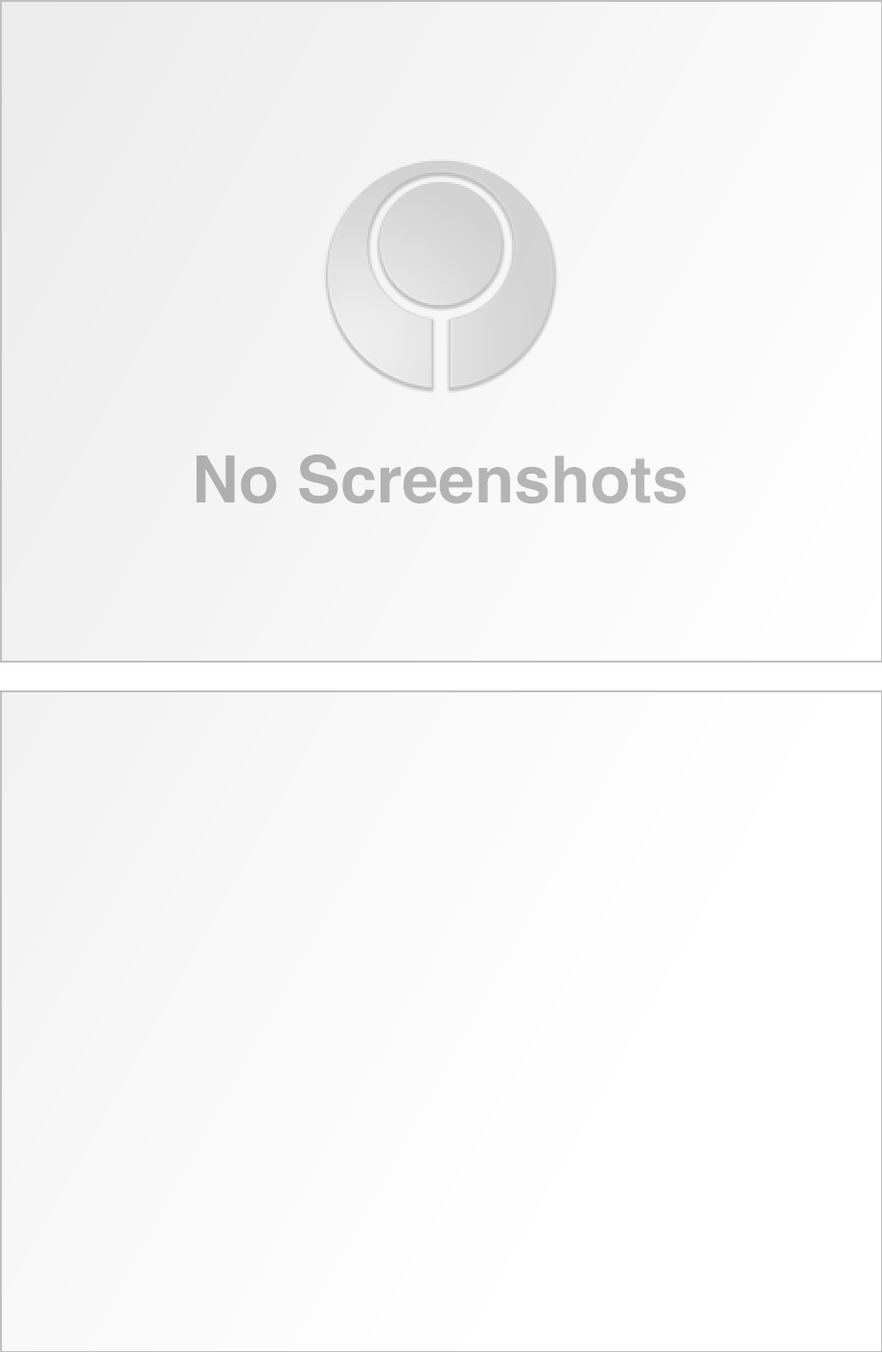
<style>
.page{position:relative;width:882px;height:1352px}
.page>*{position:absolute;margin:0}
.t1{font:65.2px "Helvetica-Bold";color:#b3b3b3}
</style>
<div class="page">
<p class="t1" style="left:197px;top:453px;width:489px;height:51px">No Screenshots</p>
</div>
